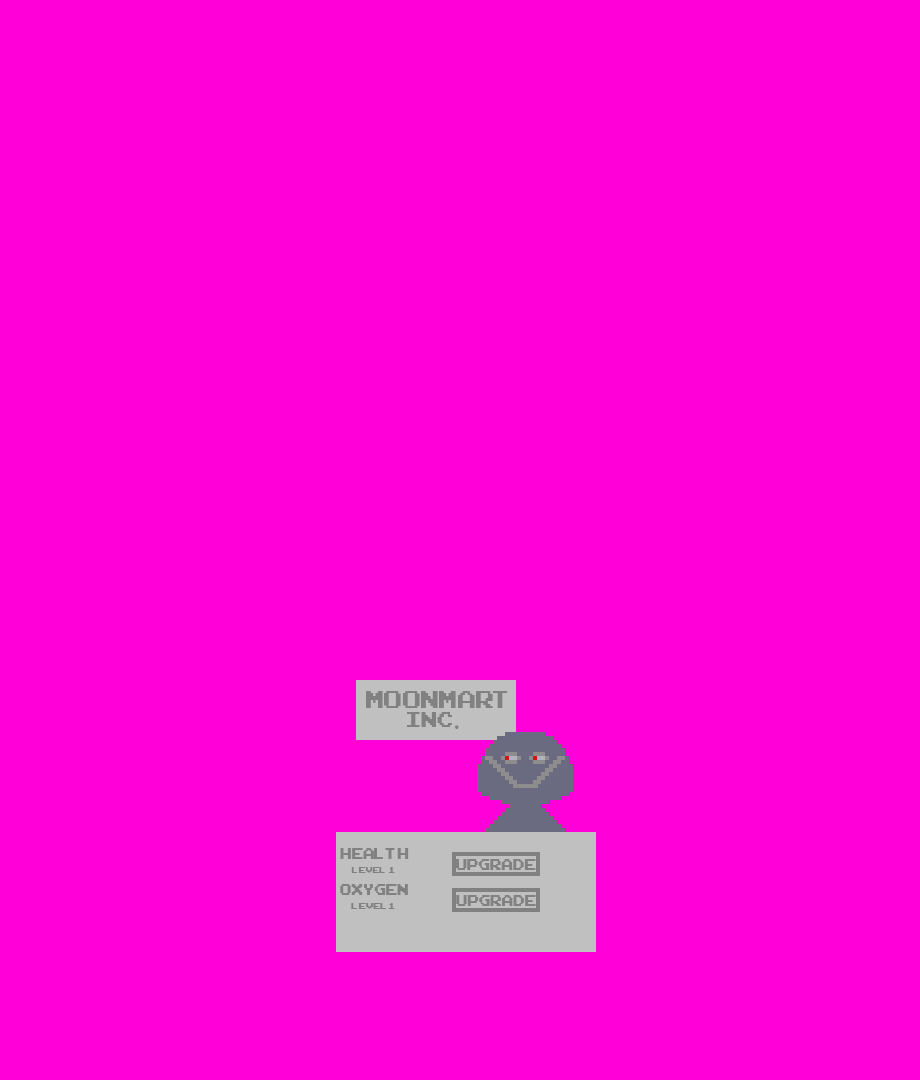
<style>
.page{position:relative;width:920px;height:1080px;background:#ff00d8}
.page>*{position:absolute;margin:0}
.t1{font:33.3px "ArcadeClassic";color:#818181}
.t2{font:29.2px "ArcadeClassic";color:#818181}
.t3{font:29.2px "MyriadPro-Regular";color:#818181}
.t4{font:20.8px "ArcadeClassic";color:#818181}
.t5{font:12.5px "ArcadeClassic";color:#818181}
.t6{font:12.5px "ArcadeClassic";color:#818181;scale:1.05 1}
</style>
<div class="page">
<p class="t1" style="left:366px;top:691px;width:142px;height:17px">MoonMart</p>
<p class="t2" style="left:407px;top:712px;width:52px;height:17px">Inc<span class="t3">.</span></p>
<p class="t4" style="left:340px;top:848px;width:69px;height:11px">Health</p>
<p class="t5" style="left:351px;top:867px;width:44px;height:6px">Level 1</p>
<p class="t4" style="left:456px;top:859px;width:80px;height:11px">Upgrade</p>
<p class="t4" style="left:340px;top:884px;width:68px;height:11px">Oxygen</p>
<p class="t6" style="left:351px;top:903px;width:44px;height:6px">level1</p>
<p class="t4" style="left:456px;top:895px;width:80px;height:11px">Upgrade</p>
</div>
